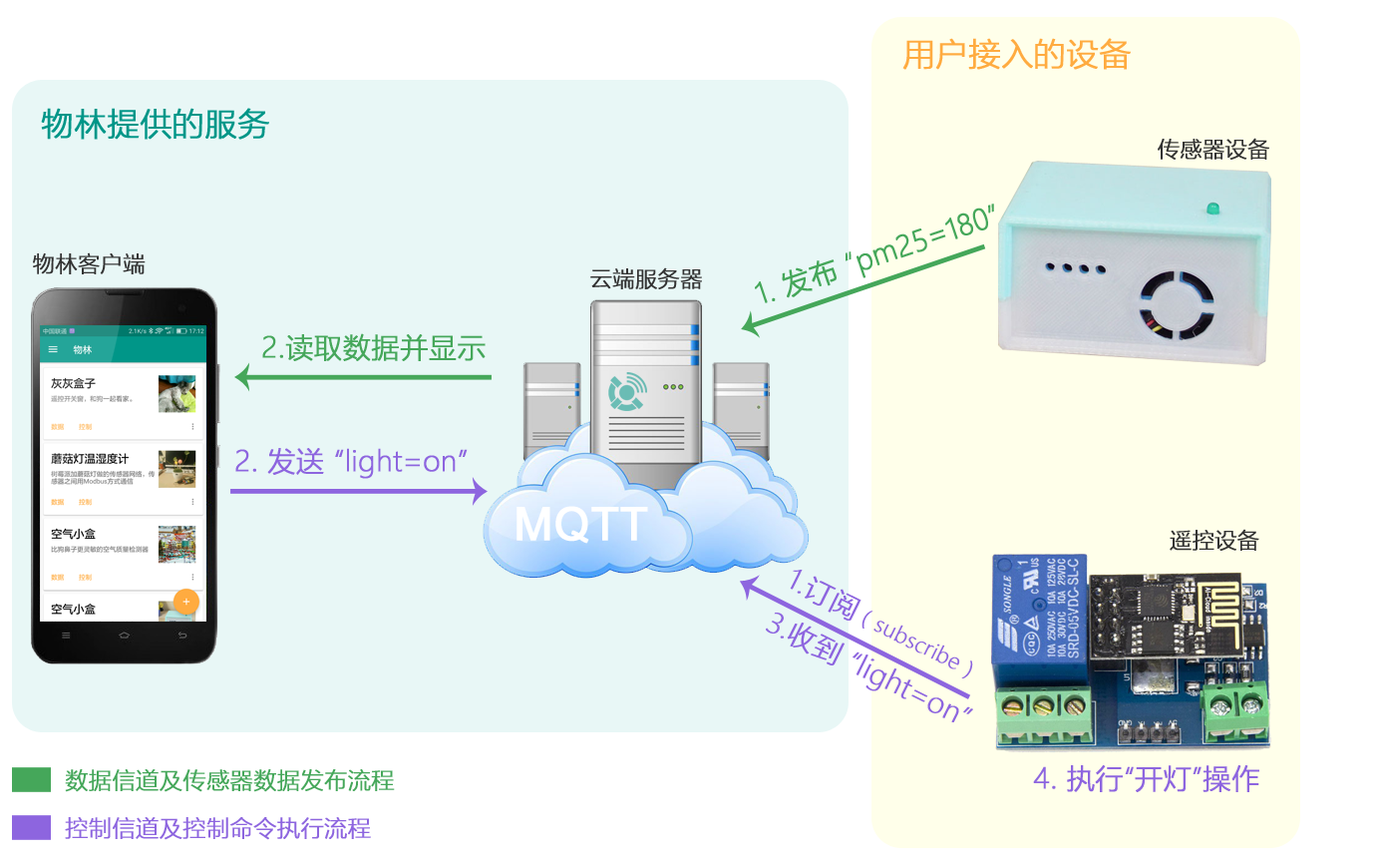
<style>
.page{position:relative;width:1376px;height:867px;background:#e8f7f6}
.page>*{position:absolute;margin:0}
.t1{font:31.9px "MicrosoftYaHeiLight";color:#ffab40;font-weight:bold}
.t2{font:31.9px "MicrosoftYaHeiLight";color:#009688;font-weight:bold}
.t3{font:21.9px "MicrosoftYaHeiLight";color:#333333;font-weight:bold}
.t4{font:27.9px "MicrosoftYaHeiLight";color:#45a75a;font-weight:bold}
.t5{font:27.9px "MicrosoftYaHeiLight";color:#8d65df;font-weight:bold}
.t6{font:45.9px "ArialMT";color:#ffffff;font-weight:bold}
.t7{font:27.9px/47.9px "MicrosoftYaHeiLight";color:#8d65df;font-weight:bold}
.t8{font:20.9px/47.9px "MicrosoftYaHeiLight";color:#8d65df;font-weight:bold}
.t9{font:22.9px "MicrosoftYaHeiLight";color:#45a75a;font-weight:bold}
.t10{font:22.9px "MicrosoftYaHeiLight";color:#8d65df;font-weight:bold}
</style>
<div class="page">
<p class="t1" style="left:902px;top:38px;width:229px;height:32px">用户接入的设备</p>
<p class="t2" style="left:41px;top:108px;width:228px;height:32px">物林提供的服务</p>
<p class="t3" style="left:1158px;top:138px;width:111px;height:22px">传感器设备</p>
<p class="t4" style="left:755px;top:203px;width:239px;height:100px;rotate:-19deg">1. 发布 “pm25=180”</p>
<p class="t3" style="left:33px;top:252px;width:113px;height:22px">物林客户端</p>
<p class="t3" style="left:590px;top:267px;width:112px;height:22px">云端服务器</p>
<p class="t4" style="left:262px;top:333px;width:224px;height:28px">2.读取数据并显示</p>
<p class="t5" style="left:235px;top:448px;width:233px;height:31px">2. 发送 “light=on”</p>
<p class="t6" style="left:517px;top:506px;width:131px;height:37px">MQTT</p>
<p class="t3" style="left:1170px;top:528px;width:89px;height:22px">遥控设备</p>
<p class="t7" style="left:766px;top:569px;width:207px;height:153px;rotate:26deg">1.订阅<span class="t8">（subscribe）<br></span>3.收到 “light=on”</p>
<p class="t9" style="left:65px;top:769px;width:330px;height:23px">数据信道及传感器数据发布流程</p>
<p class="t5" style="left:1033px;top:765px;width:226px;height:27px">4. 执行“开灯”操作</p>
<p class="t10" style="left:65px;top:817px;width:306px;height:23px">控制信道及控制命令执行流程</p>
</div>
